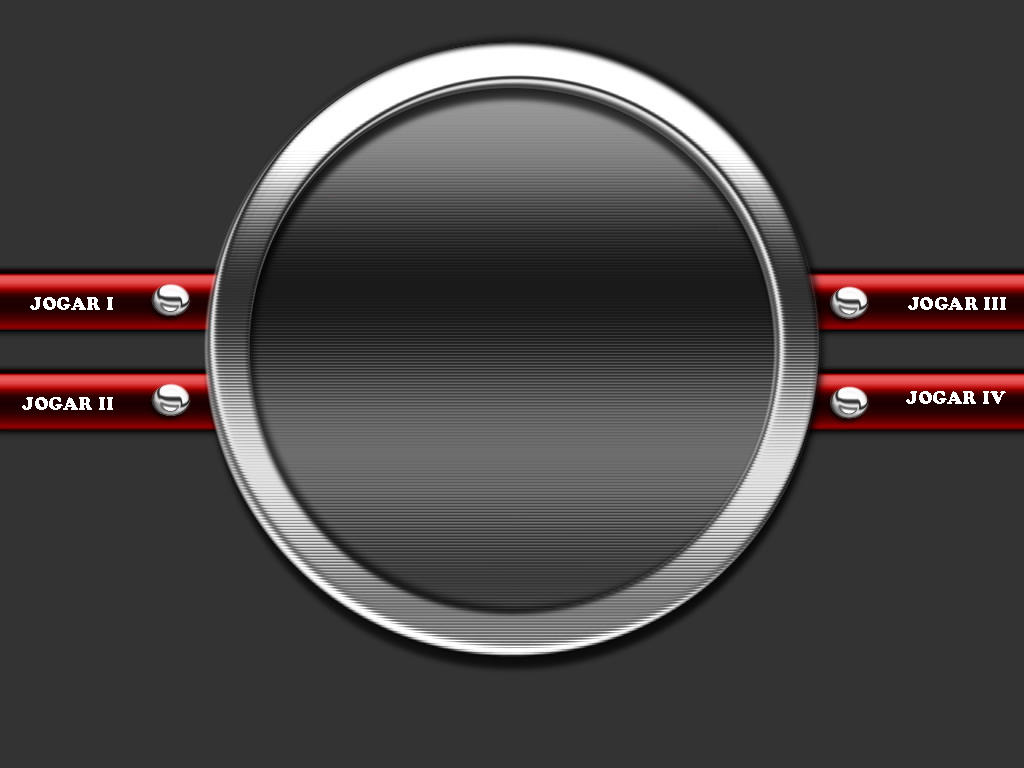
<style>
.page{position:relative;width:1024px;height:768px;background:#333333}
.page>*{position:absolute;margin:0}
.t1{font:18px "CooperBlackStd";color:#ffffff}
</style>
<div class="page">
<p class="t1" style="left:30px;top:297px;width:83px;height:13px">JOGAR I</p>
<p class="t1" style="left:908px;top:297px;width:98px;height:13px">JOGAR III</p>
<p class="t1" style="left:22px;top:397px;width:91px;height:13px">JOGAR II</p>
<p class="t1" style="left:906px;top:391px;width:100px;height:13px">JOGAR IV</p>
</div>
